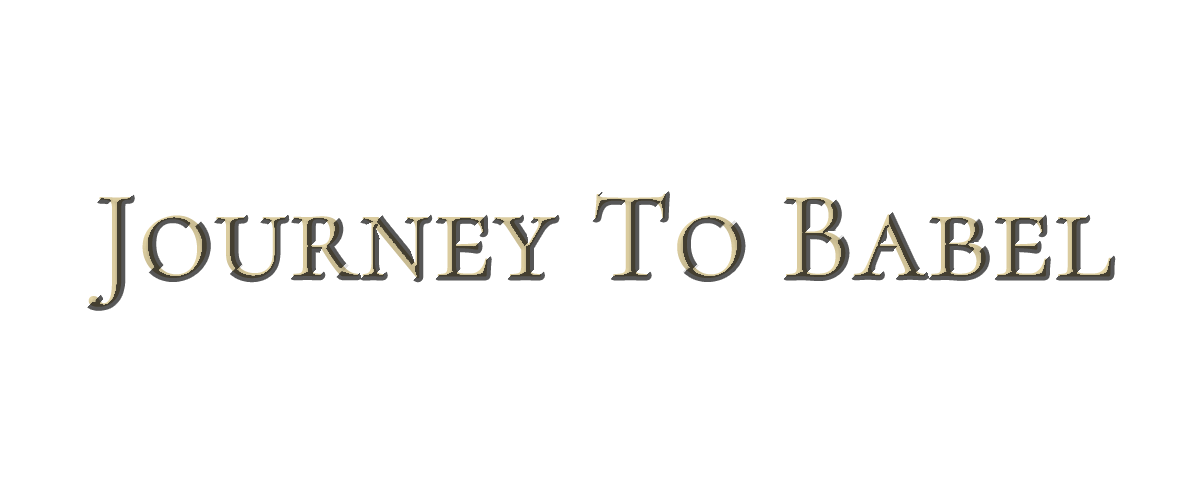
<style>
.page{position:relative;width:1200px;height:500px;background:#ffffff}
.page>*{position:absolute;margin:0}
.t1{font:125px "CormorantSC-Regular";font-weight:bold}
</style>
<div class="page">
<p class="t1" style="left:88px;top:193px;width:1024px;height:114px">Journey To Babel</p>
</div>
